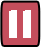
<style>
.page{position:relative;width:41px;height:47px;background:#c44e5c}
.page>*{position:absolute;margin:0}
.t1{font:18px "SpaceComics";color:#ffffff}
</style>
<div class="page">
<p class="t1" style="left:9px;top:10px;width:22px;height:28px">| |</p>
</div>
